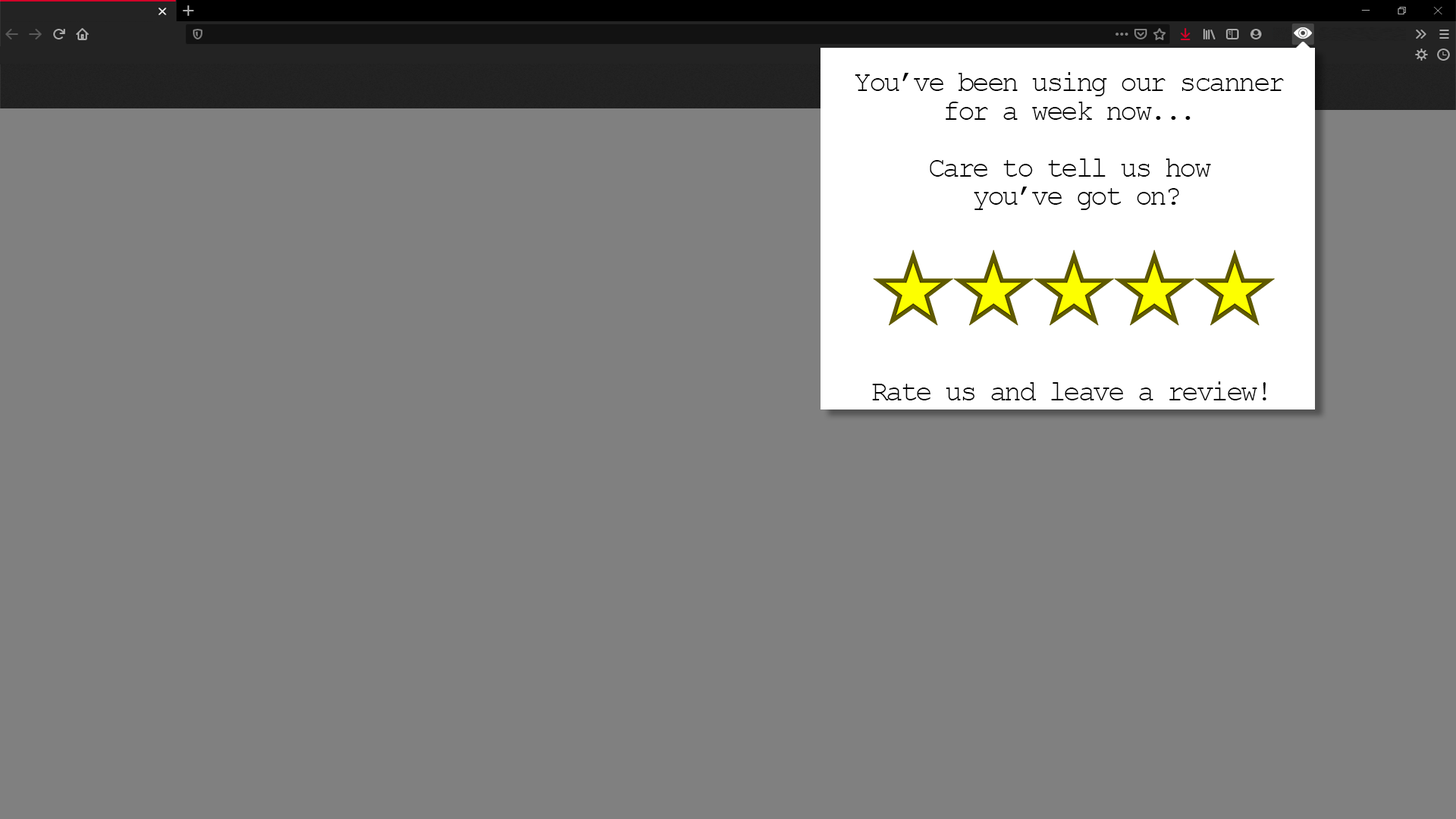
<style>
.page{position:relative;width:1456px;height:819px;background:#808080}
.page>*{position:absolute;margin:0}
.t1{font:28.4px/28.4px "CourierNewPSMT";letter-spacing:-0.08em;color:#000000}
.t2{font:28.4px "CourierNewPSMT";letter-spacing:-0.08em;color:#000000}
</style>
<div class="page">
<p class="t1" style="left:855px;top:72px;width:429px;height:138px;text-align:center">You’ve been using our scanner<br>for a week now...<br><br>Care to tell us how<br> you’ve got on?</p>
<p class="t2" style="left:872px;top:381px;width:394px;height:19px">Rate us and leave a review!</p>
</div>
